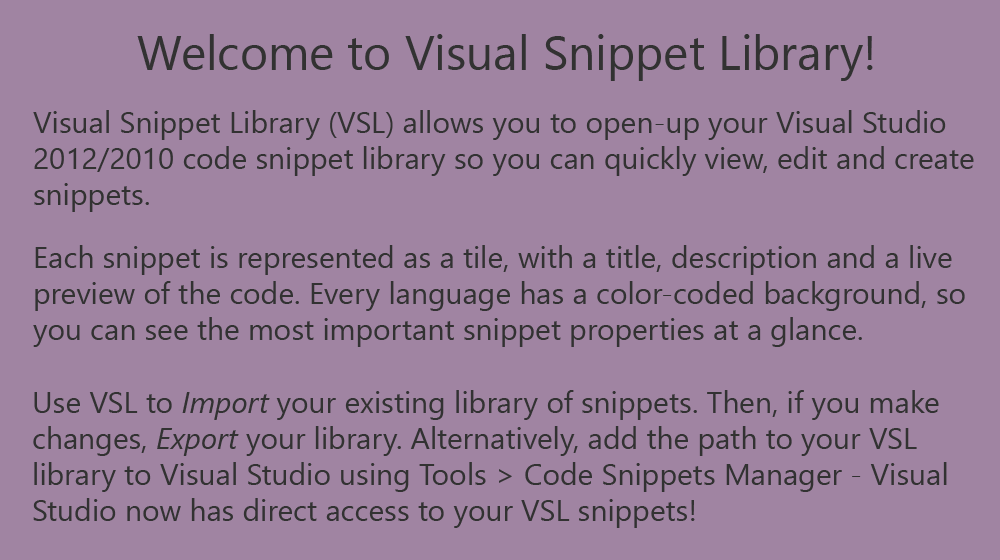
<style>
.page{position:relative;width:1000px;height:560px;background:#a084a2}
.page>*{position:absolute;margin:0}
.t1{font:48px "SegoeUI";color:#323232}
.t2{font:30px "SegoeUI";color:#323232}
.t3{font:30px "SegoeUI-Italic";color:#323232}
</style>
<div class="page">
<p class="t1" style="left:137px;top:34px;width:736px;height:47px">Welcome to Visual Snippet Library!</p>
<p class="t2" style="left:33px;top:110px;width:941px;height:102px">Visual Snippet Library (VSL) allows you to open-up your Visual Studio <br>2012/2010 code snippet library so you can quickly view, edit and create <br>snippets.</p>
<p class="t2" style="left:33px;top:245px;width:932px;height:102px">Each snippet is represented as a tile, with a title, description and a live <br>preview of the code. Every language has a color-coded background, so <br>you can see the most important snippet properties at a glance.</p>
<p class="t2" style="left:33px;top:390px;width:914px;height:138px">Use VSL to <span class="t3">Import </span>your existing library of snippets. Then, if you make <br>changes, <span class="t3">Export </span>your library. Alternatively, add the path to your VSL<br>library to Visual Studio using Tools &gt; Code Snippets Manager - Visual<br>Studio now has direct access to your VSL snippets!</p>
</div>
